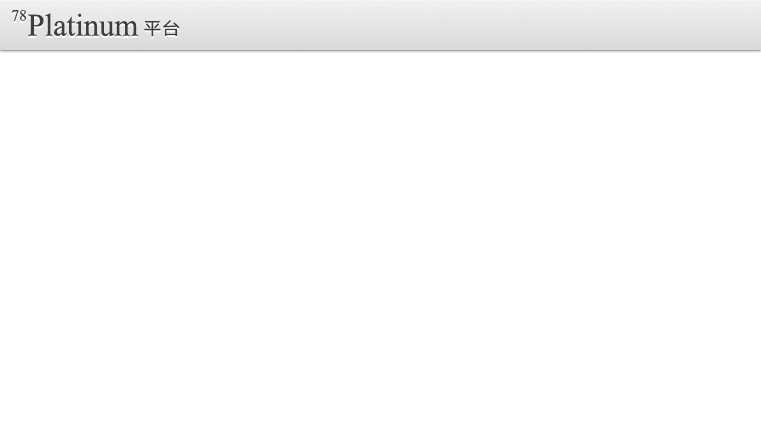
<style>
.page{position:relative;width:761px;height:432px;background:#ffffff}
.page>*{position:absolute;margin:0}
.t1{font:19.6px "Aparajita";color:#3c3d3d}
.t2{font:39.2px "Aparajita";color:#3c3d3d}
.t3{font:16.2px "MicrosoftYaHei";letter-spacing:0.1em;color:#3c3d3d;scale:1.04 1}
</style>
<div class="page">
<p class="t1" style="left:11px;top:9px;width:15px;height:12px">78</p>
<p class="t2" style="left:28px;top:13px;width:111px;height:24px">Platinum</p>
<p class="t3" style="left:144px;top:20px;width:36px;height:17px">平台</p>
</div>
